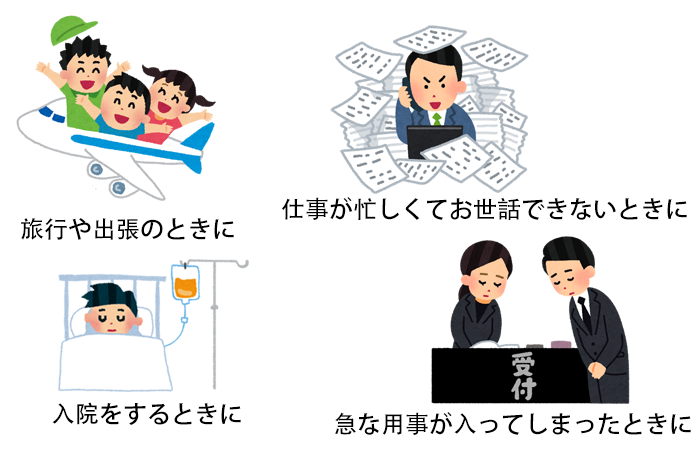
<style>
.page{position:relative;width:700px;height:450px;background:#ffffff}
.page>*{position:absolute;margin:0}
.t1{font:24px "AdobeHeitiStd-Regular";color:#000000}
</style>
<div class="page">
<p class="t1" style="left:281px;top:197px;width:406px;height:23px">仕事が忙しくてお世話できないときに</p>
<p class="t1" style="left:21px;top:218px;width:213px;height:22px">旅行や出張のときに</p>
<p class="t1" style="left:52px;top:402px;width:189px;height:23px">入院をするときに</p>
<p class="t1" style="left:335px;top:412px;width:356px;height:23px">急な用事が入ってしまったときに</p>
</div>
